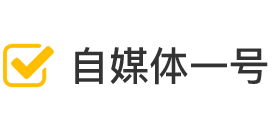
<style>
.page{position:relative;width:280px;height:130px;background:#ffffff}
.page>*{position:absolute;margin:0}
.t1{font:40px "PingFangTC-Medium";color:#333333}
</style>
<div class="page">
<p class="t1" style="left:75px;top:47px;width:193px;height:38px">自媒体一号</p>
</div>
